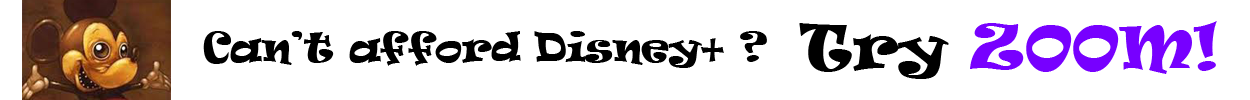
<style>
.page{position:relative;width:1250px;height:100px;background:#ffffff}
.page>*{position:absolute;margin:0}
.t1{font:58.3px "Ravie";color:#7700ff}
.t2{font:58.3px "Ravie";color:#000000}
.t3{font:37.5px "Ravie";color:#000000}
</style>
<div class="page">
<p class="t1" style="left:799px;top:21px;width:418px;height:58px"><span class="t2">Try </span>ZOOM!</p>
<p class="t3" style="left:203px;top:31px;width:564px;height:37px">Can’t afford Disney+ ?</p>
</div>
